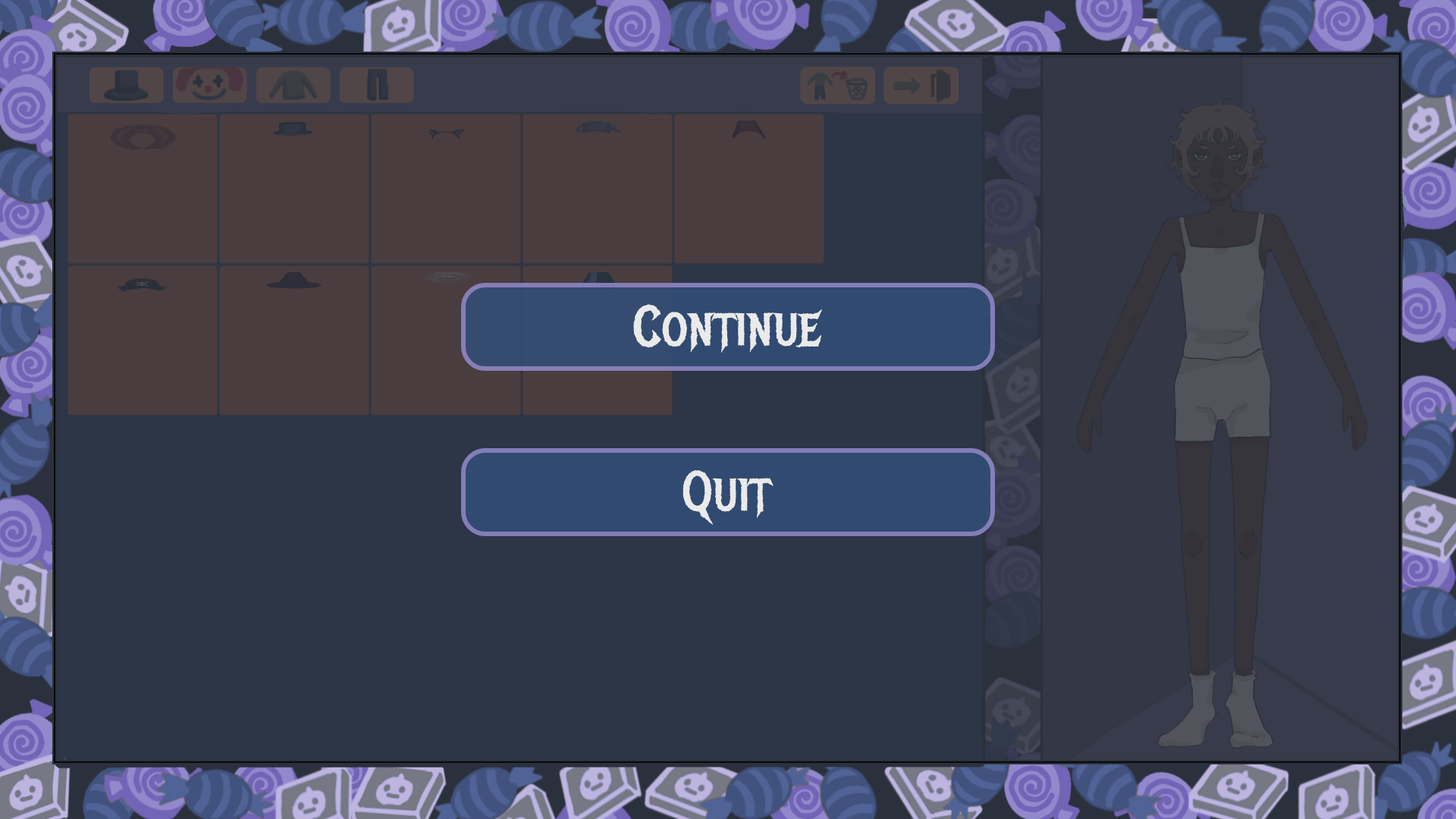
<style>
.page{position:relative;width:1456px;height:819px;background:#2c3647}
.page>*{position:absolute;margin:0}
.t1{font:56.9px "MetalMania-Regular";color:#eaeaea}
</style>
<div class="page">
<p class="t1" style="left:633px;top:304px;width:190px;height:49px">Continue</p>
<p class="t1" style="left:682px;top:470px;width:91px;height:55px">Quit</p>
</div>
